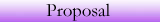
<style>
.page{position:relative;width:160px;height:22px}
.page>*{position:absolute;margin:0}
.t1{font:18.7px "Garamond";color:#000000}
</style>
<div class="page">
<p class="t1" style="left:46px;top:3px;width:64px;height:18px">Proposal</p>
</div>
